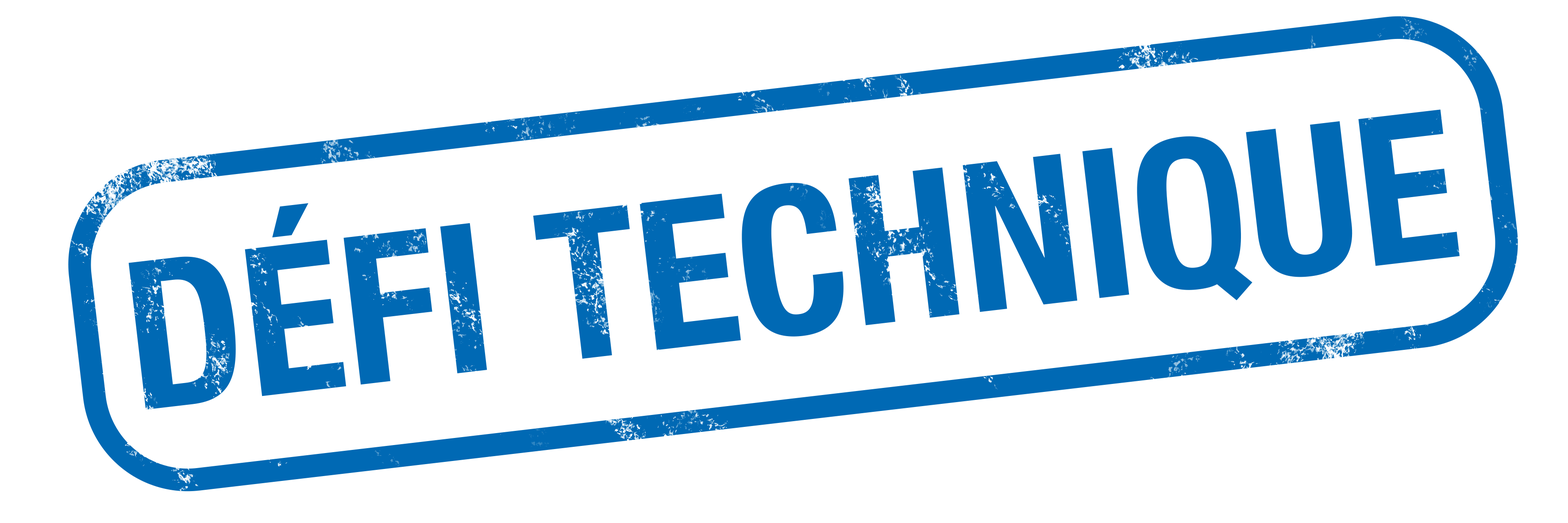
<style>
.page{position:relative;width:1568px;height:523px;background:#ffffff}
.page>*{position:absolute;margin:0}
.t1{font:206.7px "HelveticaNeueLTStd-BdCn";color:#0069b4;text-transform:uppercase}
</style>
<div class="page">
<p class="t1" style="left:128px;top:109px;width:1332px;height:300px;rotate:-7deg">Défi Technique</p>
</div>
